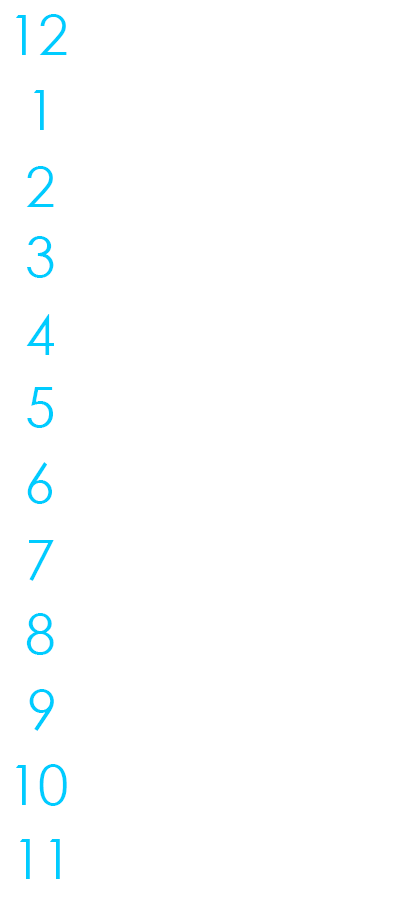
<style>
.page{position:relative;width:400px;height:900px;background:#ffffff}
.page>*{position:absolute;margin:0}
.t1{font:54.8px "CenturyGothic";color:#00ccff}
</style>
<div class="page">
<p class="t1" style="left:16px;top:14px;width:51px;height:41px">12</p>
<p class="t1" style="left:34px;top:90px;width:10px;height:40px">1</p>
<p class="t1" style="left:26px;top:166px;width:28px;height:41px">2</p>
<p class="t1" style="left:27px;top:236px;width:27px;height:42px">3</p>
<p class="t1" style="left:26px;top:314px;width:28px;height:41px">4</p>
<p class="t1" style="left:27px;top:387px;width:26px;height:41px">5</p>
<p class="t1" style="left:27px;top:462px;width:25px;height:42px">6</p>
<p class="t1" style="left:29px;top:540px;width:25px;height:41px">7</p>
<p class="t1" style="left:26px;top:613px;width:28px;height:42px">8</p>
<p class="t1" style="left:29px;top:689px;width:25px;height:42px">9</p>
<p class="t1" style="left:16px;top:764px;width:51px;height:42px">10</p>
<p class="t1" style="left:20px;top:839px;width:40px;height:40px">11</p>
</div>
